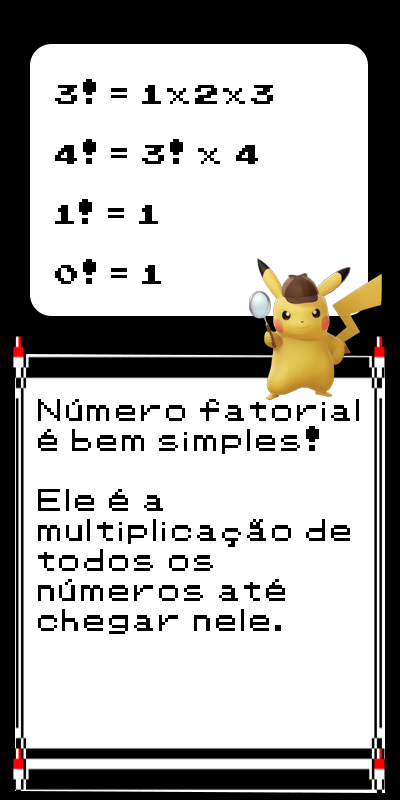
<style>
.page{position:relative;width:400px;height:800px;background:#ffffff}
.page>*{position:absolute;margin:0}
.t1{font:25px "Pokemon-Classic";color:#000000}
</style>
<div class="page">
<p class="t1" style="left:55px;top:79px;width:218px;height:205px">3! = 1x2x3<br><br>4! = 3! x 4<br><br>1! = 1<br><br>0! = 1</p>
<p class="t1" style="left:38px;top:399px;width:321px;height:235px">Número fatorial<br>é bem simples!<br><br>Ele é a<br>multiplicação de<br>todos os <br>números até <br>chegar nele.</p>
</div>
